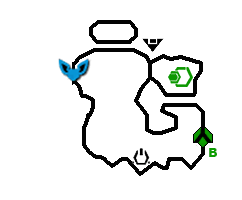
<style>
.page{position:relative;width:242px;height:200px;background:#ffffff}
.page>*{position:absolute;margin:0}
.t1{font:12px "Arial-Black";color:#0d9e01}
</style>
<div class="page">
<p class="t1" style="left:209px;top:148px;width:8px;height:9px">B</p>
</div>
